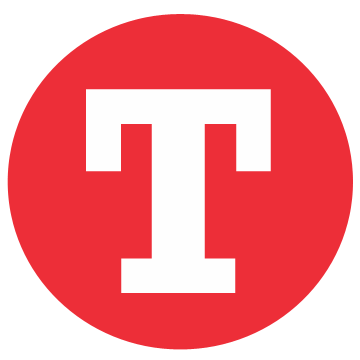
<style>
.page{position:relative;width:360px;height:360px;background:#ed2e38}
.page>*{position:absolute;margin:0}
.t1{font:300px "Rockwell-Bold";color:#fefefe}
</style>
<div class="page">
<p class="t1" style="left:86px;top:89px;width:185px;height:204px">T</p>
</div>
